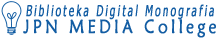
<style>
.page{position:relative;width:220px;height:38px;background:#ffffff}
.page>*{position:absolute;margin:0}
.t1{font:15.2px "Tahoma";letter-spacing:0.2em;color:#135da3;font-weight:bold;font-style:italic;scale:0.65 1}
.t2{font:19.1px "MaiandraGD-Regular";letter-spacing:0.2em;color:#135da3;font-weight:bold;scale:0.82 1}
</style>
<div class="page">
<p class="t1" style="left:26px;top:4px;width:188px;height:16px">Biblioteka Digital Monografia</p>
<p class="t2" style="left:23px;top:19px;width:193px;height:19px">JPN MEDIA College</p>
</div>
